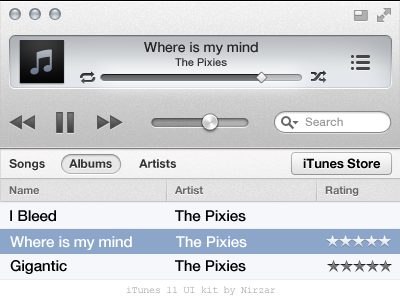
<style>
.page{position:relative;width:400px;height:300px}
.page>*{position:absolute;margin:0}
.t1{font:14px "HelveticaNeue-Medium";letter-spacing:-0.005em;color:#262626}
.t2{font:11px "HelveticaNeue-Medium";letter-spacing:-0.005em;color:#333333}
.t3{font:12px "HelveticaNeue-Medium";letter-spacing:-0.005em;color:#999999}
.t4{font:12px "HelveticaNeue-Bold";letter-spacing:-0.005em;color:#333333}
.t5{font:13px "HelveticaNeue-Bold";letter-spacing:-0.005em;color:#000000}
.t6{font:11px "HelveticaNeue-Bold";letter-spacing:-0.005em;color:#666666}
.t7{font:15px "HelveticaNeue-Medium";letter-spacing:-0.005em;color:#000000}
.t8{font:15px "HelveticaNeue-Medium";letter-spacing:-0.005em;color:#ffffff}
</style>
<div class="page">
<p class="t1" style="left:144px;top:42px;width:114px;height:13px">Where is my mind</p>
<p class="t2" style="left:175px;top:58px;width:52px;height:8px">The Pixies</p>
<p class="t3" style="left:305px;top:117px;width:38px;height:9px">Search</p>
<p class="t4" style="left:9px;top:159px;width:36px;height:12px">Songs</p>
<p class="t4" style="left:69px;top:159px;width:43px;height:9px">Albums</p>
<p class="t4" style="left:139px;top:159px;width:37px;height:9px">Artists</p>
<p class="t5" style="left:303px;top:158px;width:77px;height:11px">iTunes Store</p>
<p class="t6" style="left:9px;top:186px;width:30px;height:9px">Name</p>
<p class="t6" style="left:175px;top:186px;width:28px;height:9px">Artist</p>
<p class="t6" style="left:325px;top:186px;width:34px;height:10px">Rating</p>
<p class="t7" style="left:10px;top:210px;width:46px;height:12px">I Bleed</p>
<p class="t7" style="left:175px;top:210px;width:71px;height:12px">The Pixies</p>
<p class="t8" style="left:10px;top:236px;width:122px;height:14px">Where is my mind</p>
<p class="t8" style="left:176px;top:236px;width:71px;height:12px">The Pixies</p>
<p class="t7" style="left:10px;top:260px;width:57px;height:14px">Gigantic</p>
<p class="t7" style="left:175px;top:260px;width:71px;height:12px">The Pixies</p>
</div>
